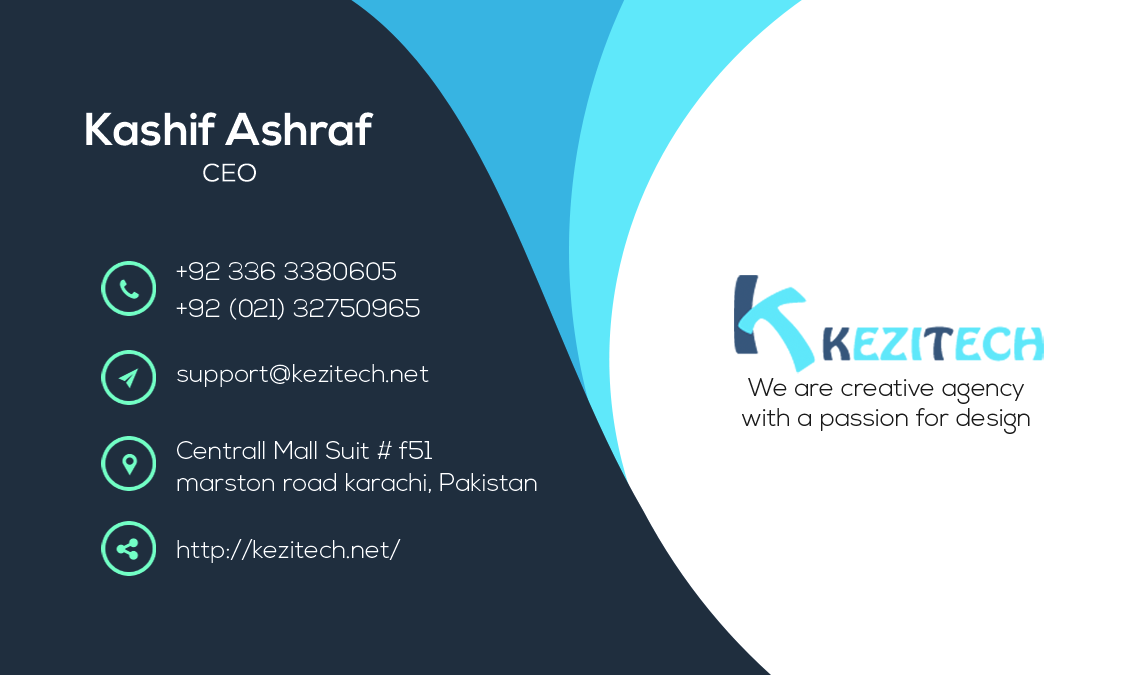
<style>
.page{position:relative;width:1125px;height:675px;background:#1f2e3e}
.page>*{position:absolute;margin:0}
.t1{font:46.1px "NexaBold";color:#ffffff}
.t2{font:24.7px "NexaLight";letter-spacing:0.02em;color:#ffffff;font-weight:bold}
.t3{font:25px/37.5px "NexaLight";color:#ffffff;text-transform:uppercase}
.t4{font:25px "NexaLight";color:#ffffff}
.t5{font:25px "NexaLight";color:#1a1a1a}
.t6{font:25px/32px "NexaLight";color:#ffffff}
</style>
<div class="page">
<p class="t1" style="left:86px;top:112px;width:288px;height:34px">Kashif Ashraf</p>
<p class="t2" style="left:203px;top:163px;width:53px;height:19px">CEO</p>
<p class="t3" style="left:176px;top:262px;width:244px;height:58px">+92 336 3380605<br>+92 (021) 32750965</p>
<p class="t4" style="left:177px;top:364px;width:252px;height:23px">support@kezitech.net</p>
<p class="t5" style="left:742px;top:378px;width:288px;height:56px;text-align:center">We are creative agency<br>with a passion for design</p>
<p class="t6" style="left:177px;top:441px;width:360px;height:52px">Centrall Mall Suit # f51<br>marston road karachi, Pakistan</p>
<p class="t4" style="left:177px;top:539px;width:224px;height:24px">http://kezitech.net/</p>
</div>
